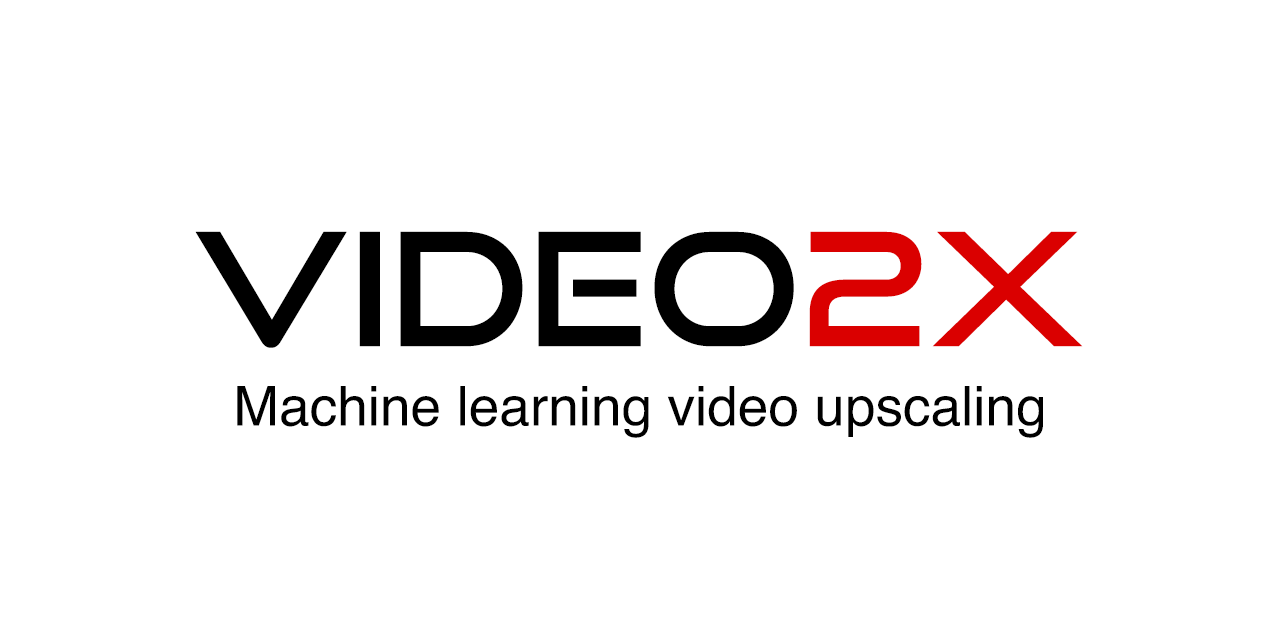
<style>
.page{position:relative;width:1280px;height:640px;background:#ffffff}
.page>*{position:absolute;margin:0}
.t1{font:157px "GoodTimesRg-Regular";color:#000000}
.t2{font:157px "GoodTimesRg-Regular";color:#da0000}
.t3{font:55px "Helvetica";color:#000000}
</style>
<div class="page">
<p class="t1" style="left:195px;top:231px;width:888px;height:117px">Video<span class="t2">2X</span></p>
<p class="t3" style="left:237px;top:386px;width:806px;height:52px">Machine learning video upscaling</p>
</div>
